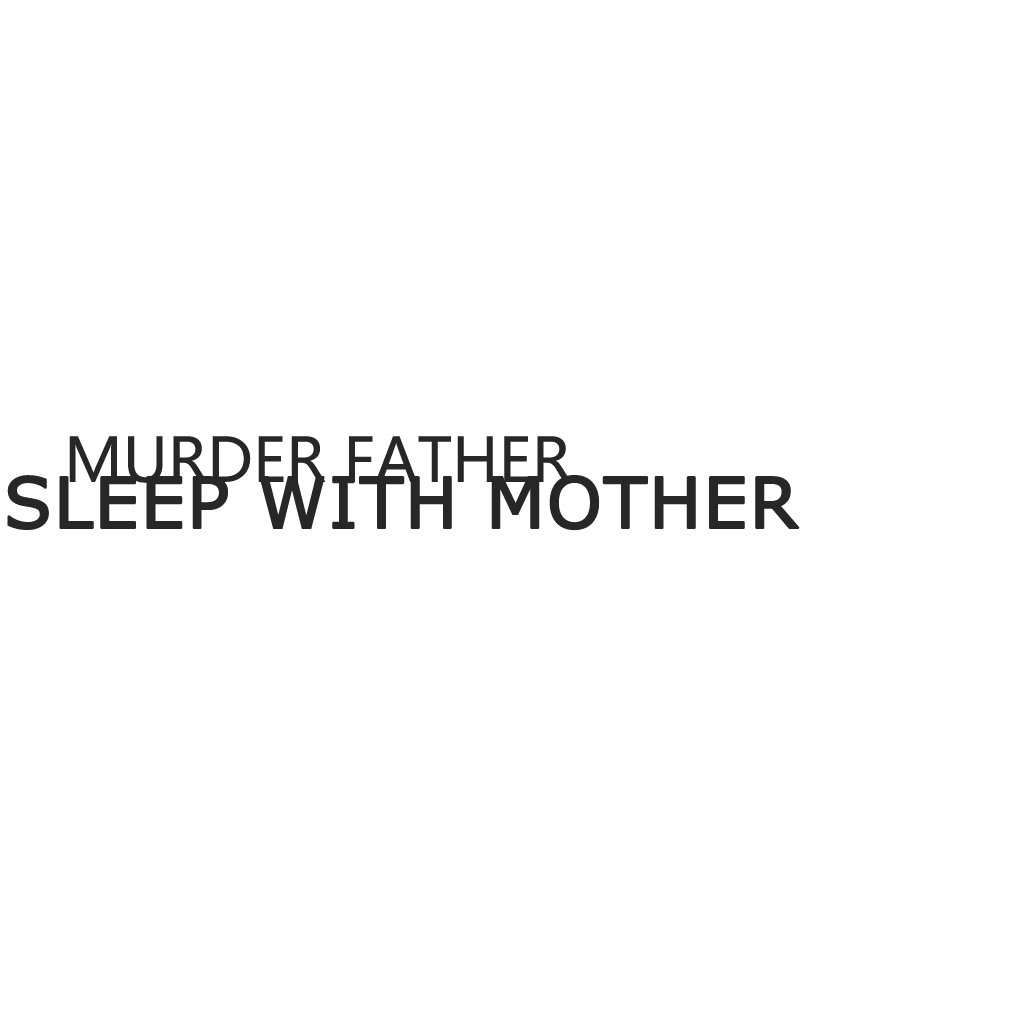
<style>
.page{position:relative;width:1024px;height:1024px;background:#ffffff}
.page>*{position:absolute;margin:0}
.t1{font:60px "MicrosoftYaHei-Regular";color:#272727}
.t2{font:70px "MSReferenceSansSerif";color:#272727;font-weight:bold}
</style>
<div class="page">
<p class="t1" style="left:69px;top:436px;width:502px;height:47px">MURDER FATHER</p>
<p class="t2" style="left:7px;top:475px;width:793px;height:56px">SLEEP WITH MOTHER</p>
</div>
